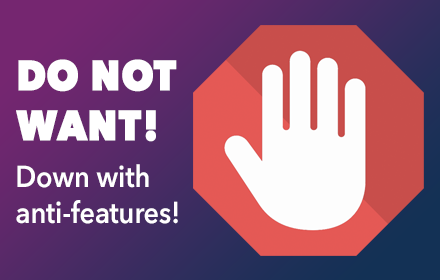
<style>
.page{position:relative;width:440px;height:280px}
.page>*{position:absolute;margin:0}
.t1{font:42px "AvenirNext-Heavy";color:#ffffff;font-weight:bold;scale:0.9 1}
.t2{font:29.9px "AvenirNext-DemiBold";color:#ffffff;scale:0.9 1}
</style>
<div class="page">
<p class="t1" style="left:16px;top:59px;width:161px;height:83px">DO NOT<br>WANT!</p>
<p class="t2" style="left:16px;top:164px;width:162px;height:60px">Down with<br>anti-features!</p>
</div>
